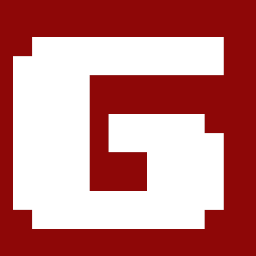
<style>
.page{position:relative;width:256px;height:256px;background:#8e0707}
.page>*{position:absolute;margin:0}
.t1{font:383.5px "UpheavalTT-BRK-";color:#ffffff}
</style>
<div class="page">
<p class="t1" style="left:13px;top:37px;width:211px;height:192px">G</p>
</div>
